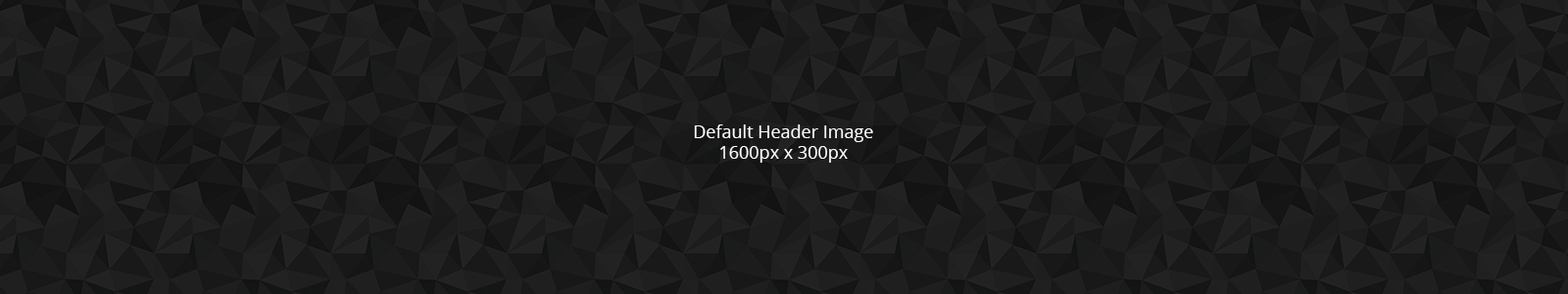
<style>
.page{position:relative;width:1568px;height:294px}
.page>*{position:absolute;margin:0}
.t1{font:17.6px "OpenSans";color:#fdfbfb}
</style>
<div class="page">
<p class="t1" style="left:694px;top:124px;width:179px;height:39px;text-align:center">Default Header Image<br>1600px x 300px</p>
</div>
